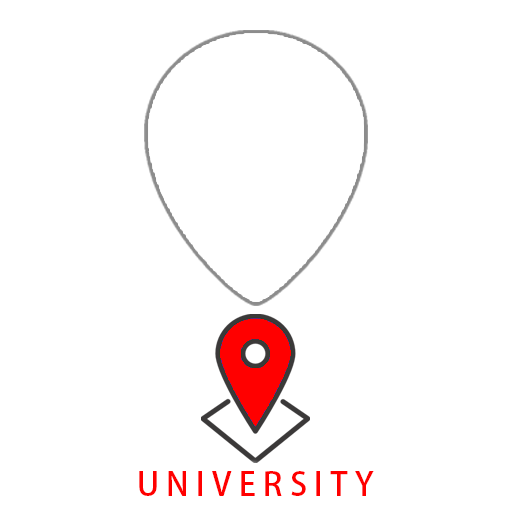
<style>
.page{position:relative;width:512px;height:512px;background:#ffffff}
.page>*{position:absolute;margin:0}
.t1{font:32.1px "AdobeFanHeitiStd-Bold";color:#ff0000}
</style>
<div class="page">
<p class="t1" style="left:139px;top:471px;width:235px;height:25px">U N I V E R S I T Y</p>
</div>
